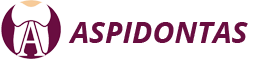
<style>
.page{position:relative;width:255px;height:60px;background:#ffffff}
.page>*{position:absolute;margin:0}
.t1{font:30px "OpenSans-BoldItalic";color:#690d40}
</style>
<div class="page">
<p class="t1" style="left:68px;top:22px;width:180px;height:21px">ASPIDONTAS</p>
</div>
